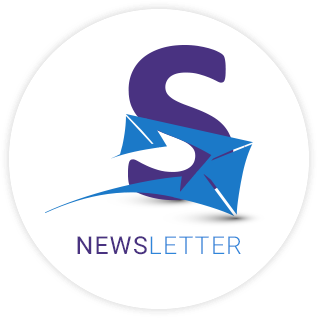
<style>
.page{position:relative;width:318px;height:318px;background:#ffffff}
.page>*{position:absolute;margin:0}
.t1{font:24.7px "Roboto-Light";letter-spacing:0.05em;color:#2e86da;text-transform:uppercase}
.t2{font:24.7px "Roboto-Regular";letter-spacing:0.05em;color:#493281;text-transform:uppercase}
</style>
<div class="page">
<p class="t1" style="left:77px;top:236px;width:164px;height:19px"><span class="t2">News</span>letter</p>
</div>
